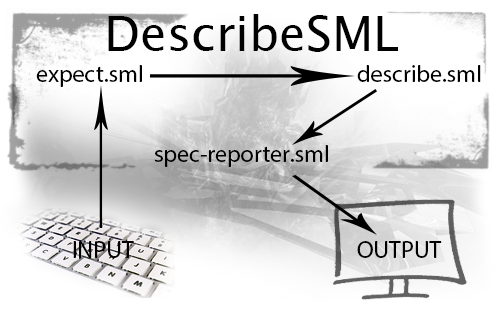
<style>
.page{position:relative;width:500px;height:309px;background:#ffffff}
.page>*{position:absolute;margin:0}
.t1{font:48px "LucidaSansUnicode";color:#000000}
.t2{font:24px "MyriadPro-Regular";color:#000000}
</style>
<div class="page">
<p class="t1" style="left:108px;top:14px;width:290px;height:38px">DescribeSML</p>
<p class="t2" style="left:36px;top:65px;width:106px;height:22px">expect.sml</p>
<p class="t2" style="left:357px;top:65px;width:124px;height:17px">describe.sml</p>
<p class="t2" style="left:154px;top:145px;width:174px;height:22px">spec-reporter.sml</p>
<p class="t2" style="left:73px;top:241px;width:61px;height:17px">INPUT</p>
<p class="t2" style="left:357px;top:241px;width:85px;height:17px">OUTPUT</p>
</div>
